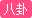
<style>
.page{position:relative;width:32px;height:18px;background:#ff4a81}
.page>*{position:absolute;margin:0}
.t1{font:12px "SimSun";color:#ffffff;text-transform:uppercase}
</style>
<div class="page">
<p class="t1" style="left:4px;top:3px;width:23px;height:12px">八卦</p>
</div>
